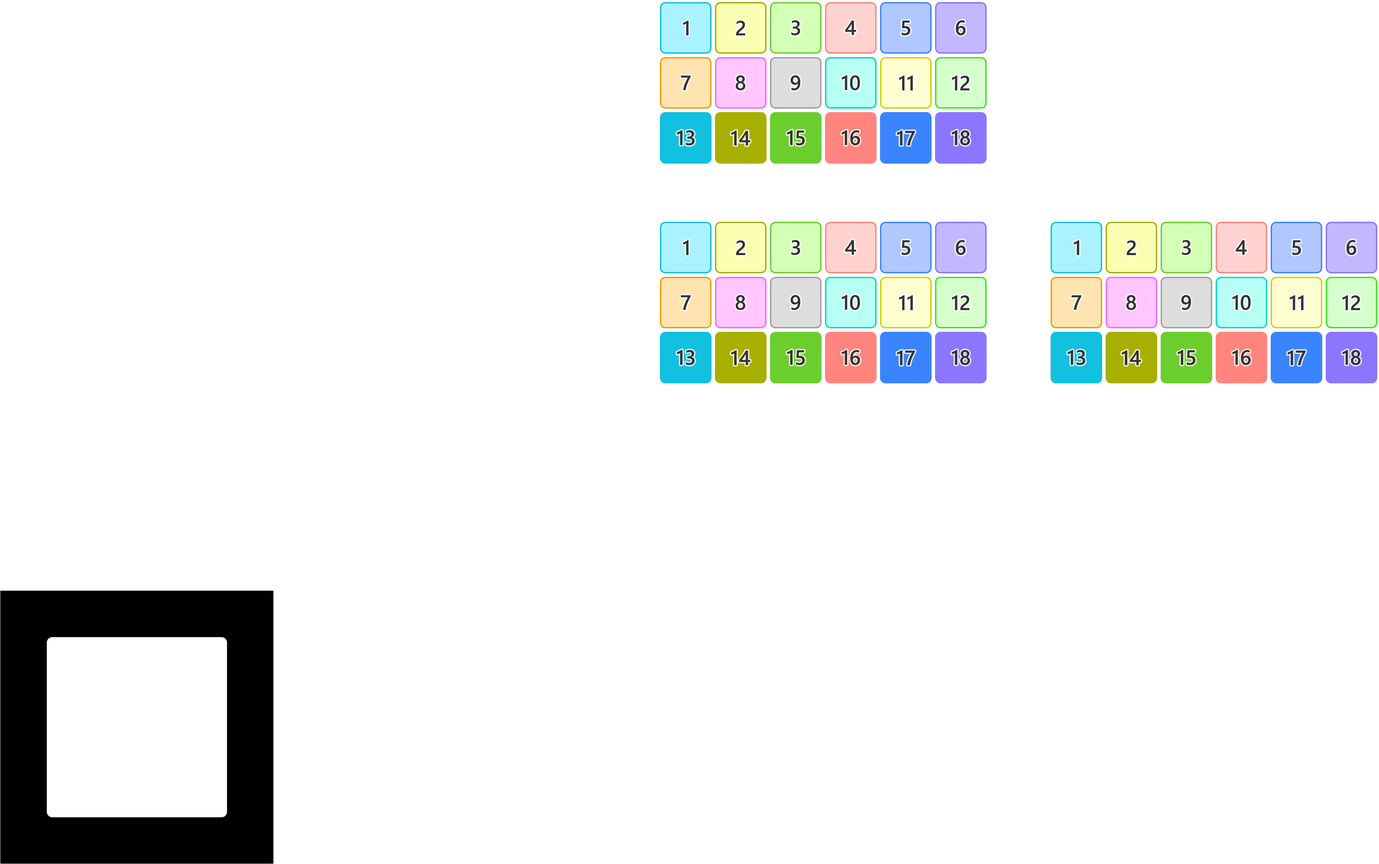
<style>
.page{position:relative;width:1379px;height:864px;background:#ffffff}
.page>*{position:absolute;margin:0}
.t1{font:20.6px "SegoeUI-Semibold";color:#333333;text-transform:uppercase}
</style>
<div class="page">
<p class="t1" style="left:683px;top:20px;width:6px;height:15px">1</p>
<p class="t1" style="left:736px;top:21px;width:9px;height:14px">2</p>
<p class="t1" style="left:792px;top:20px;width:8px;height:15px">3</p>
<p class="t1" style="left:845px;top:20px;width:12px;height:15px">4</p>
<p class="t1" style="left:902px;top:20px;width:9px;height:15px">5</p>
<p class="t1" style="left:956px;top:20px;width:10px;height:15px">6</p>
<p class="t1" style="left:681px;top:75px;width:10px;height:15px">7</p>
<p class="t1" style="left:736px;top:75px;width:10px;height:15px">8</p>
<p class="t1" style="left:791px;top:75px;width:10px;height:15px">9</p>
<p class="t1" style="left:842px;top:75px;width:18px;height:15px">10</p>
<p class="t1" style="left:899px;top:75px;width:14px;height:15px">11</p>
<p class="t1" style="left:952px;top:75px;width:18px;height:15px">12</p>
<p class="t1" style="left:677px;top:130px;width:18px;height:16px">13</p>
<p class="t1" style="left:731px;top:130px;width:20px;height:16px">14</p>
<p class="t1" style="left:787px;top:130px;width:18px;height:16px">15</p>
<p class="t1" style="left:842px;top:130px;width:18px;height:16px">16</p>
<p class="t1" style="left:897px;top:130px;width:18px;height:16px">17</p>
<p class="t1" style="left:952px;top:130px;width:18px;height:16px">18</p>
<p class="t1" style="left:683px;top:240px;width:6px;height:15px">1</p>
<p class="t1" style="left:736px;top:240px;width:9px;height:15px">2</p>
<p class="t1" style="left:792px;top:240px;width:8px;height:15px">3</p>
<p class="t1" style="left:845px;top:240px;width:12px;height:15px">4</p>
<p class="t1" style="left:902px;top:240px;width:9px;height:15px">5</p>
<p class="t1" style="left:956px;top:240px;width:10px;height:15px">6</p>
<p class="t1" style="left:1074px;top:240px;width:6px;height:15px">1</p>
<p class="t1" style="left:1127px;top:240px;width:9px;height:15px">2</p>
<p class="t1" style="left:1182px;top:240px;width:9px;height:15px">3</p>
<p class="t1" style="left:1236px;top:240px;width:11px;height:15px">4</p>
<p class="t1" style="left:1293px;top:240px;width:8px;height:15px">5</p>
<p class="t1" style="left:1347px;top:240px;width:10px;height:15px">6</p>
<p class="t1" style="left:681px;top:295px;width:10px;height:15px">7</p>
<p class="t1" style="left:736px;top:295px;width:10px;height:15px">8</p>
<p class="t1" style="left:791px;top:295px;width:10px;height:15px">9</p>
<p class="t1" style="left:842px;top:295px;width:18px;height:15px">10</p>
<p class="t1" style="left:899px;top:295px;width:14px;height:15px">11</p>
<p class="t1" style="left:952px;top:295px;width:18px;height:15px">12</p>
<p class="t1" style="left:1072px;top:295px;width:10px;height:15px">7</p>
<p class="t1" style="left:1127px;top:295px;width:10px;height:15px">8</p>
<p class="t1" style="left:1182px;top:295px;width:10px;height:15px">9</p>
<p class="t1" style="left:1233px;top:295px;width:18px;height:15px">10</p>
<p class="t1" style="left:1290px;top:295px;width:14px;height:15px">11</p>
<p class="t1" style="left:1343px;top:295px;width:17px;height:15px">12</p>
<p class="t1" style="left:677px;top:350px;width:18px;height:15px">13</p>
<p class="t1" style="left:731px;top:350px;width:20px;height:15px">14</p>
<p class="t1" style="left:787px;top:350px;width:18px;height:15px">15</p>
<p class="t1" style="left:842px;top:350px;width:18px;height:15px">16</p>
<p class="t1" style="left:897px;top:350px;width:18px;height:15px">17</p>
<p class="t1" style="left:952px;top:350px;width:18px;height:15px">18</p>
<p class="t1" style="left:1068px;top:350px;width:18px;height:15px">13</p>
<p class="t1" style="left:1122px;top:350px;width:19px;height:15px">14</p>
<p class="t1" style="left:1178px;top:350px;width:18px;height:15px">15</p>
<p class="t1" style="left:1233px;top:350px;width:18px;height:15px">16</p>
<p class="t1" style="left:1288px;top:350px;width:18px;height:15px">17</p>
<p class="t1" style="left:1343px;top:350px;width:18px;height:15px">18</p>
</div>
